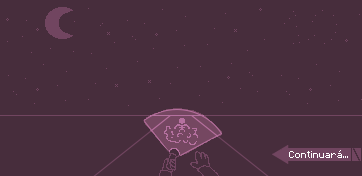
<style>
.page{position:relative;width:362px;height:176px;background:#472d3c}
.page>*{position:absolute;margin:0}
.t1{font:8px "Minecraftia-Regular";color:#ffffff}
</style>
<div class="page">
<p class="t1" style="left:289px;top:150px;width:59px;height:8px">Continuará...</p>
</div>
